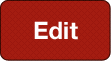
<style>
.page{position:relative;width:111px;height:61px;background:#a41c11}
.page>*{position:absolute;margin:0}
.t1{font:24px "HelveticaNeue-Bold";color:#ffffff}
</style>
<div class="page">
<p class="t1" style="left:34px;top:21px;width:44px;height:19px">Edit</p>
</div>
